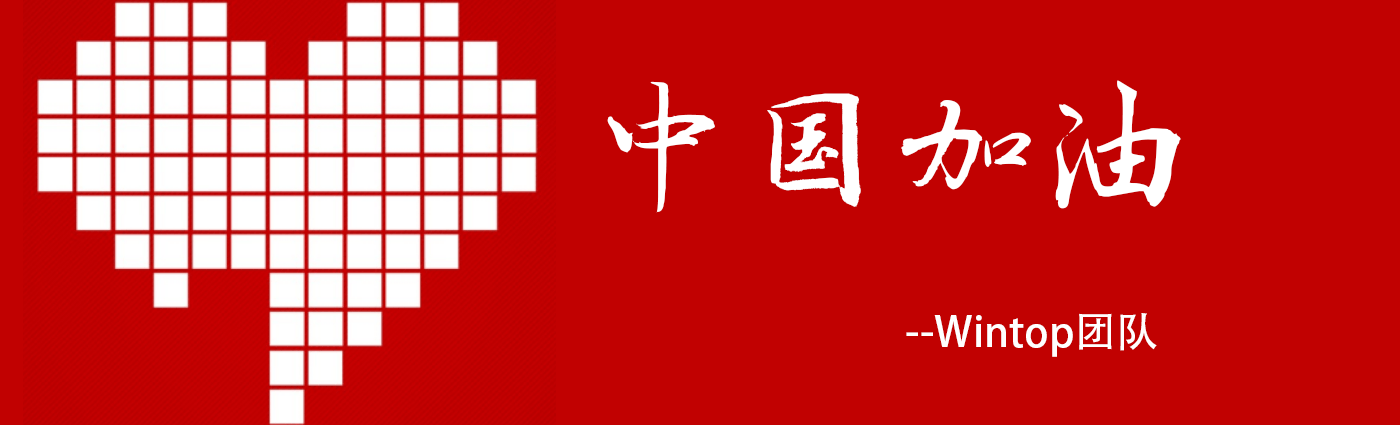
<style>
.page{position:relative;width:1400px;height:425px;background:#c10101}
.page>*{position:absolute;margin:0}
.t1{font:152px "zihun87hao-qiankunshoushu";color:#ffffff}
.t2{font:41.7px "AdobeHeitiStd-Regular";color:#ffffff}
</style>
<div class="page">
<p class="t1" style="left:607px;top:80px;width:574px;height:133px">中国加油</p>
<p class="t2" style="left:906px;top:313px;width:251px;height:44px">--Wintop团队</p>
</div>
